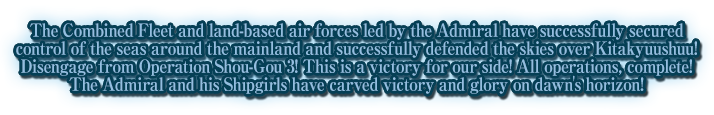
<style>
.page{position:relative;width:714px;height:115px;background:#053f55}
.page>*{position:absolute;margin:0}
.t1{font:18px/18px "RyuminPro-ExBold";letter-spacing:-0.04em;color:#93bee0;scale:0.9 1}
</style>
<div class="page">
<p class="t1" style="left:16px;top:23px;width:681px;height:71px;text-align:center">The Combined Fleet and land-based air forces led by the Admiral have successfully secured<br>control of the seas around the mainland and successfully defended the skies over Kitakyuushuu!<br>Disengage from Operation Shou-Gou 3! This is a victory for our side! All operations, complete!<br>The Admiral and his Shipgirls have carved victory and glory on dawn's horizon!</p>
</div>
